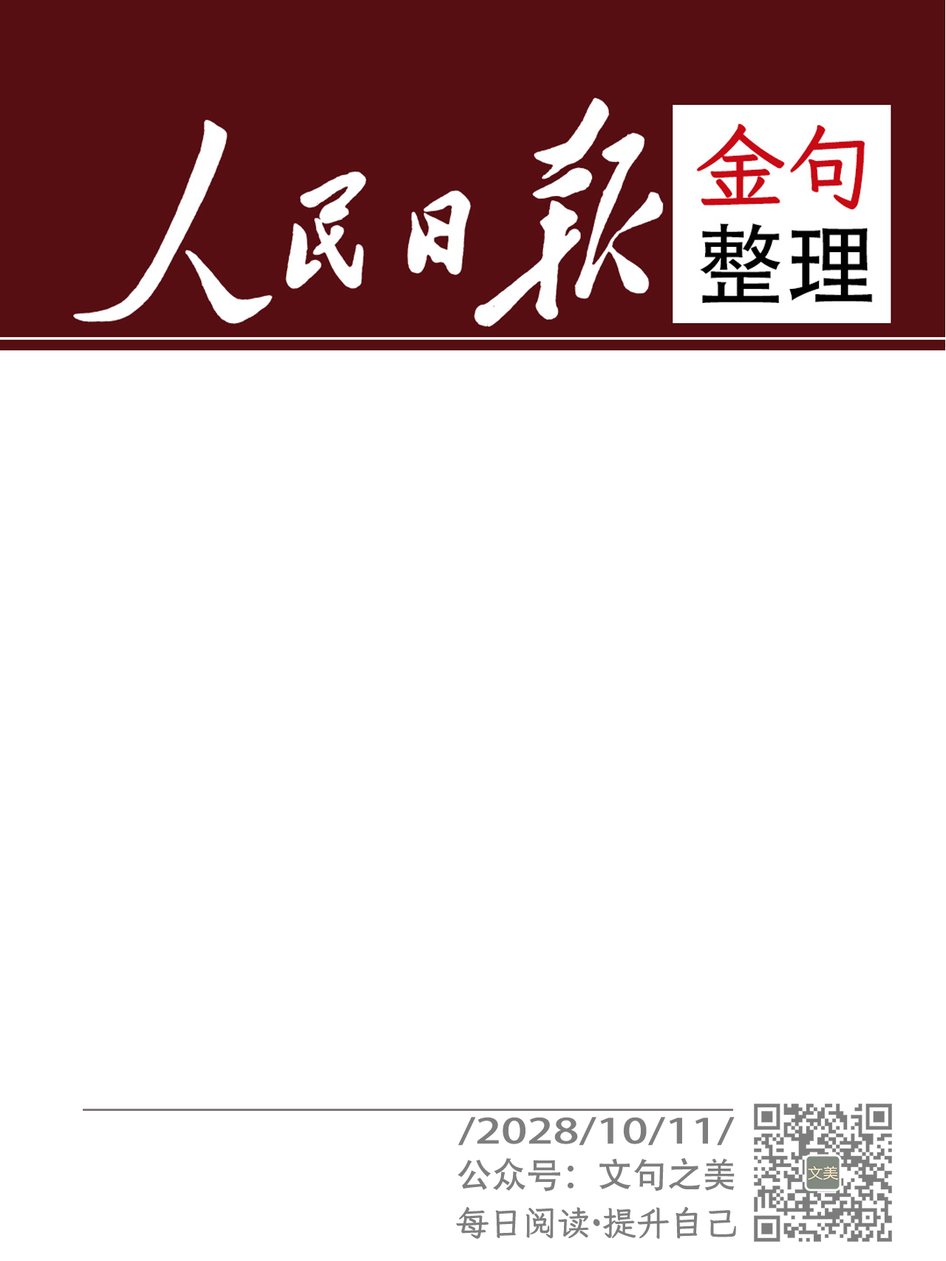
<style>
.page{position:relative;width:946px;height:1261px;background:#ffffff}
.page>*{position:absolute;margin:0}
.t1{font:34px "AdobeHeitiStd-Regular";color:#7e7e7e;scale:1.36 1}
.t2{font:35px "AdobeHeitiStd-Regular";color:#7e7e7e}
.t3{font:33.9px "LXGWWenKaiGBScreen";color:#7e7e7e}
</style>
<div class="page">
<p class="t1" style="left:458px;top:1117px;width:277px;height:28px">/2028/10/11/</p>
<p class="t2" style="left:457px;top:1157px;width:278px;height:34px">公众号：文句之美</p>
<p class="t3" style="left:456px;top:1206px;width:280px;height:33px">每日阅读·提升自己</p>
</div>
